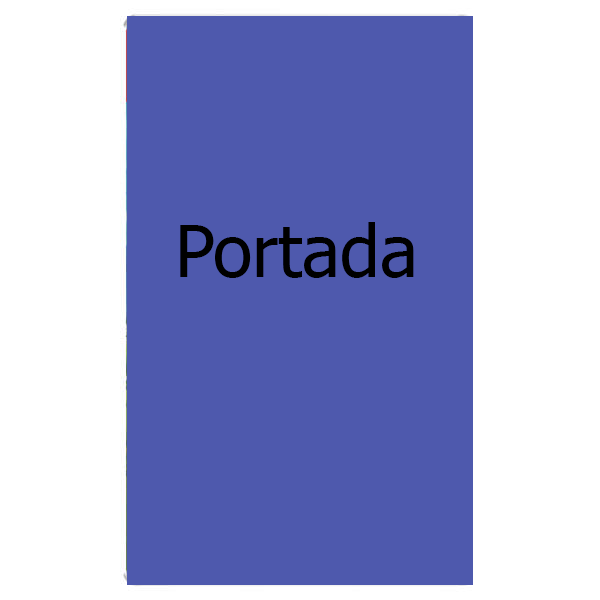
<style>
.page{position:relative;width:600px;height:600px;background:#4e59ad}
.page>*{position:absolute;margin:0}
.t1{font:72px "Tahoma";color:#000000}
</style>
<div class="page">
<p class="t1" style="left:180px;top:222px;width:234px;height:56px">Portada</p>
</div>
